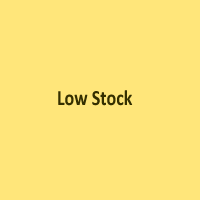
<style>
.page{position:relative;width:200px;height:200px;background:#ffe67a}
.page>*{position:absolute;margin:0}
.t1{font:21.8px "Calibri-Bold";color:#342f00;scale:0.83 1}
</style>
<div class="page">
<p class="t1" style="left:58px;top:90px;width:75px;height:16px">Low Stock</p>
</div>
